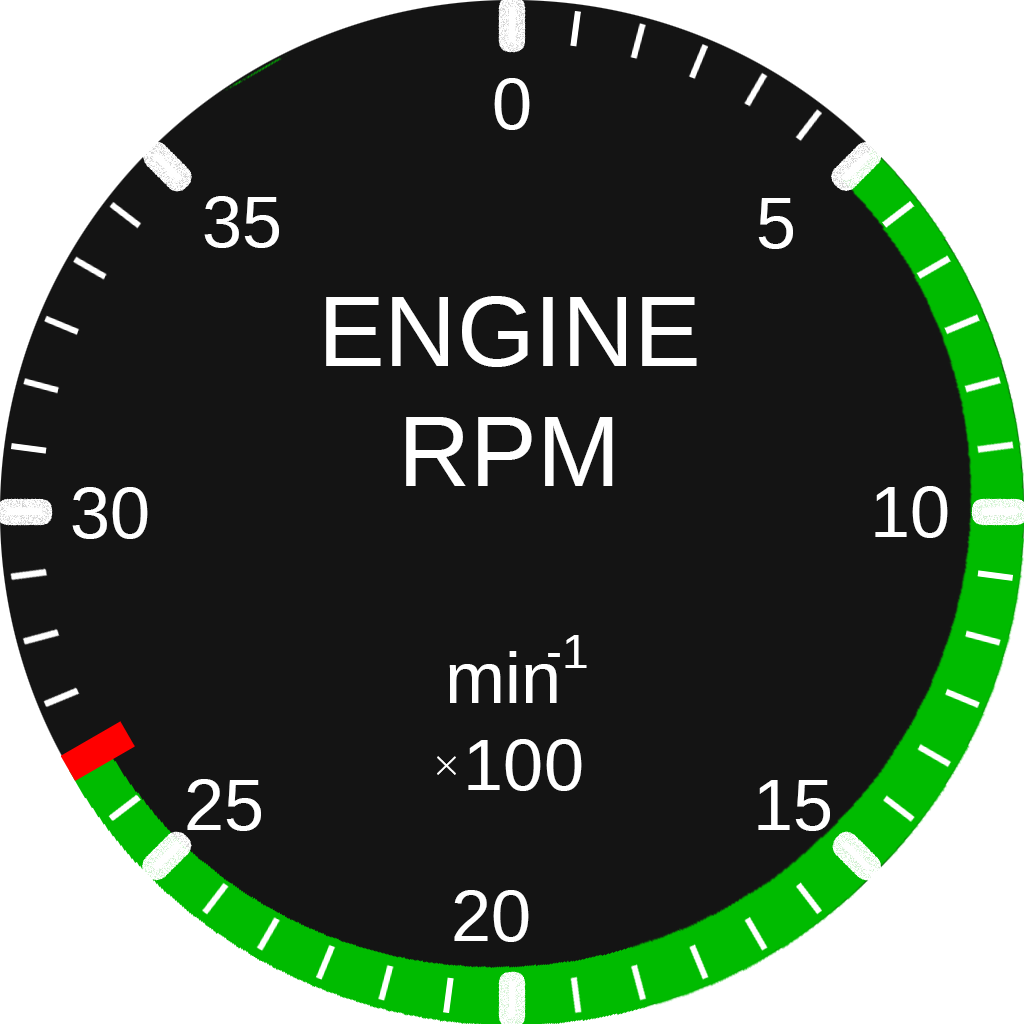
<style>
.page{position:relative;width:1024px;height:1024px;background:#141414}
.page>*{position:absolute;margin:0}
.t1{font:72px "LiberationSans";color:#ffffff}
.t2{font:100px "LiberationSans";color:#ffffff}
.t3{font:48px "LiberationSans";color:#ffffff}
.t4{font:48px "TimesNewRomanPSMT";color:#ffffff}
</style>
<div class="page">
<p class="t1" style="left:494px;top:78px;width:36px;height:52px">0</p>
<p class="t1" style="left:204px;top:196px;width:75px;height:52px">35</p>
<p class="t1" style="left:758px;top:198px;width:35px;height:51px">5</p>
<p class="t2" style="left:326px;top:296px;width:371px;height:190px;text-align:center">ENGINE<br>RPM</p>
<p class="t1" style="left:875px;top:486px;width:73px;height:52px">10</p>
<p class="t1" style="left:72px;top:487px;width:76px;height:52px">30</p>
<p class="t3" style="left:548px;top:635px;width:39px;height:33px">-1</p>
<p class="t1" style="left:449px;top:651px;width:133px;height:140px;text-align:center">min <br> 100</p>
<p class="t4" style="left:437px;top:756px;width:19px;height:19px">×</p>
<p class="t1" style="left:187px;top:779px;width:74px;height:52px">25</p>
<p class="t1" style="left:758px;top:780px;width:72px;height:51px">15</p>
<p class="t1" style="left:454px;top:890px;width:75px;height:52px">20</p>
</div>
